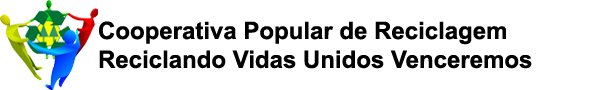
<style>
.page{position:relative;width:600px;height:90px;background:#ffffff}
.page>*{position:absolute;margin:0}
.t1{font:24px "Arial-BoldMT";color:#000000}
</style>
<div class="page">
<p class="t1" style="left:99px;top:21px;width:433px;height:48px;text-align:right">Cooperativa Popular de Reciclagem<br>Reciclando Vidas Unidos Venceremos</p>
</div>
